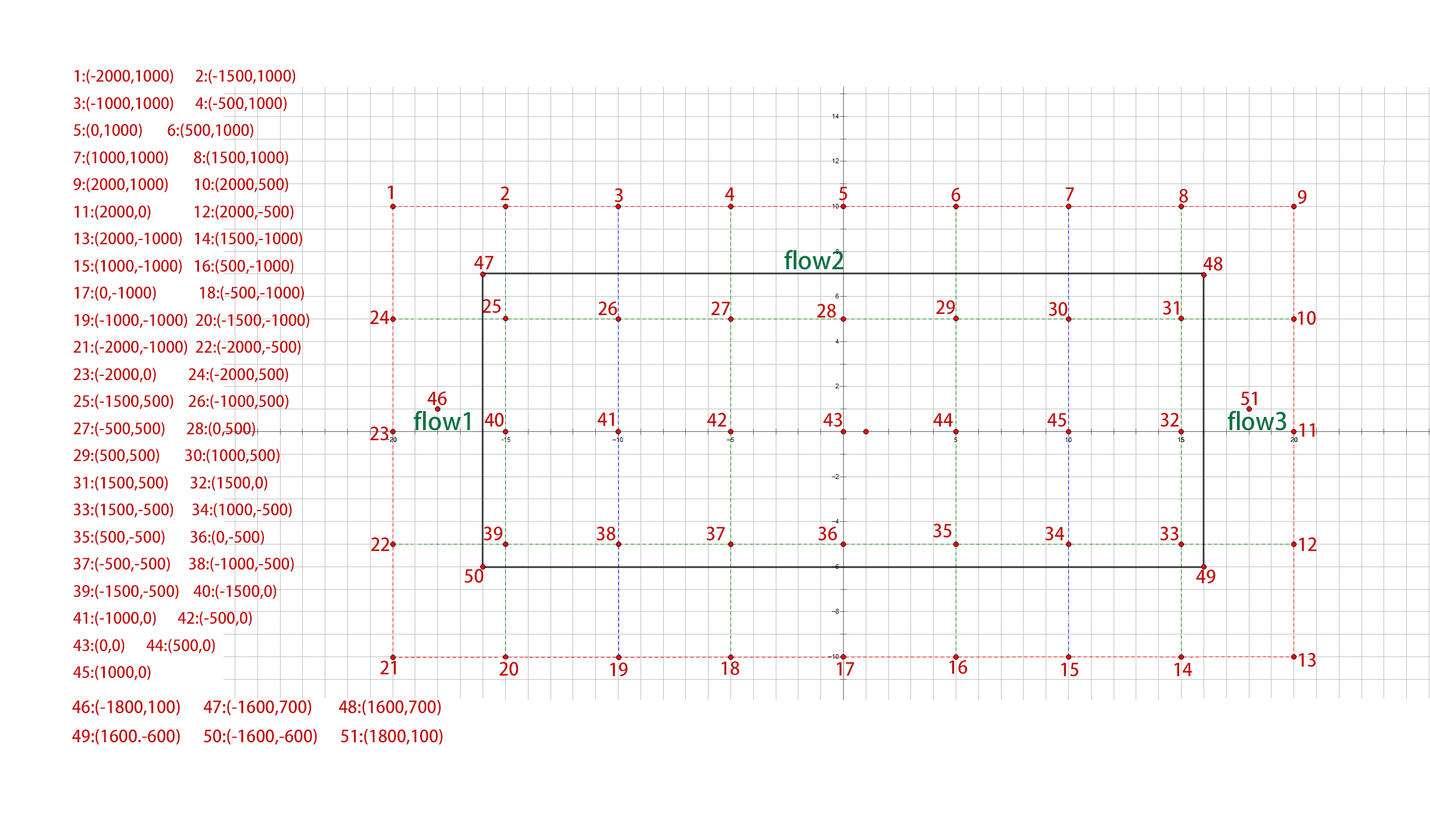
<style>
.page{position:relative;width:1430px;height:834px;background:#ffffff}
.page>*{position:absolute;margin:0}
.t1{font:15.5px "AdobeHeitiStd-Regular";color:#c40a0a}
.t2{font:17.9px "AdobeHeitiStd-Regular";color:#c40a0a}
.t3{font:23.8px "AdobeHeitiStd-Regular";color:#077342}
.t4{font:16.7px "AdobeHeitiStd-Regular";color:#c40a0a}
</style>
<div class="page">
<p class="t1" style="left:73px;top:69px;width:236px;height:611px">1:(-2000,1000)      2:(-1500,1000)<br>3:(-1000,1000)      4:(-500,1000)<br>5:(0,1000)       6:(500,1000)<br>7:(1000,1000)       8:(1500,1000)<br>9:(2000,1000)       10:(2000,500)<br>11:(2000,0)            12:(2000,-500)<br>13:(2000,-1000)   14:(1500,-1000)<br>15:(1000,-1000)   16:(500,-1000)<br>17:(0,-1000)            18:(-500,-1000)<br>19:(-1000,-1000)  20:(-1500,-1000)<br>21:(-2000,-1000)  22:(-2000,-500)<br>23:(-2000,0)         24:(-2000,500)<br>25:(-1500,500)    26:(-1000,500)<br>27:(-500,500)      28:(0,500)<br>29:(500,500)       30:(1000,500)<br>31:(1500,500)      32:(1500,0)<br>33:(1500,-500)     34:(1000,-500)<br>35:(500,-500)       36:(0,-500)<br>37:(-500,-500)     38:(-1000,-500)<br>39:(-1500,-500)    40:(-1500,0)<br>41:(-1000,0)      42:(-500,0)<br>43:(0,0)      44:(500,0)<br>45:(1000,0)</p>
<p class="t2" style="left:474px;top:256px;width:19px;height:13px">47</p>
<p class="t3" style="left:784px;top:250px;width:59px;height:20px">flow2</p>
<p class="t2" style="left:1203px;top:257px;width:19px;height:14px">48</p>
<p class="t2" style="left:427px;top:391px;width:20px;height:15px">46</p>
<p class="t2" style="left:1240px;top:391px;width:16px;height:15px">51</p>
<p class="t3" style="left:413px;top:410px;width:57px;height:21px">flow1</p>
<p class="t3" style="left:1227px;top:410px;width:59px;height:21px">flow3</p>
<p class="t2" style="left:464px;top:569px;width:20px;height:14px">50</p>
<p class="t2" style="left:1196px;top:570px;width:19px;height:14px">49</p>
<p class="t4" style="left:72px;top:700px;width:371px;height:45px">46:(-1800,100)      47:(-1600,700)       48:(1600,700)<br>49:(1600.-600)      50:(-1600,-600)      51:(1800,100)</p>
</div>
